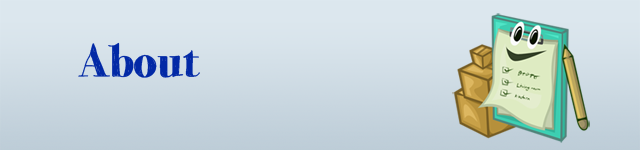
<style>
.page{position:relative;width:640px;height:150px}
.page>*{position:absolute;margin:0}
.t1{font:47.2px "MomsDiner";color:#0229a6}
</style>
<div class="page">
<p class="t1" style="left:78px;top:42px;width:122px;height:36px">About</p>
</div>
